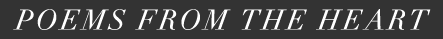
<style>
.page{position:relative;width:443px;height:39px;background:#333333}
.page>*{position:absolute;margin:0}
.t1{font:27.9px "DidotLH-Italic";letter-spacing:0.1em;color:#ffffff;text-transform:uppercase}
</style>
<div class="page">
<p class="t1" style="left:13px;top:9px;width:418px;height:21px">Poems from the heart</p>
</div>
